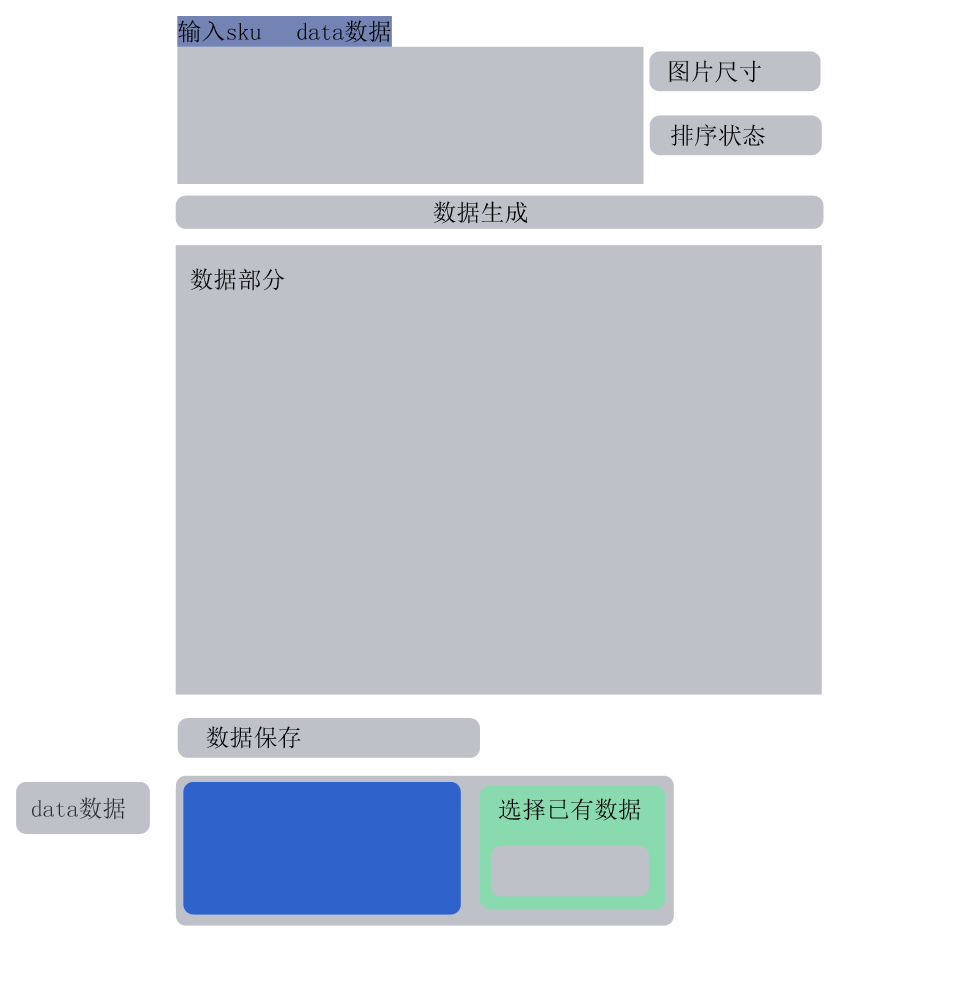
<style>
.page{position:relative;width:960px;height:1000px;background:#ffffff}
.page>*{position:absolute;margin:0}
.t1{font:24px "SimSun";color:#000000}
.t2{font:24px "SimSun";color:#000205}
.t3{font:24px "SimSun";color:#2c2f32}
.t4{font:24px "SimSun";color:#000603}
</style>
<div class="page">
<p class="t1" style="left:178px;top:20px;width:213px;height:23px">输入sku  data数据  选</p>
<p class="t1" style="left:669px;top:60px;width:92px;height:23px">图片尺寸</p>
<p class="t1" style="left:671px;top:124px;width:94px;height:23px">排序状态</p>
<p class="t1" style="left:433px;top:201px;width:95px;height:23px">数据生成</p>
<p class="t1" style="left:190px;top:268px;width:95px;height:23px">数据部分</p>
<p class="t2" style="left:206px;top:726px;width:95px;height:23px">数据保存</p>
<p class="t3" style="left:32px;top:797px;width:93px;height:23px">data数据</p>
<p class="t4" style="left:498px;top:798px;width:143px;height:23px">选择已有数据</p>
</div>
